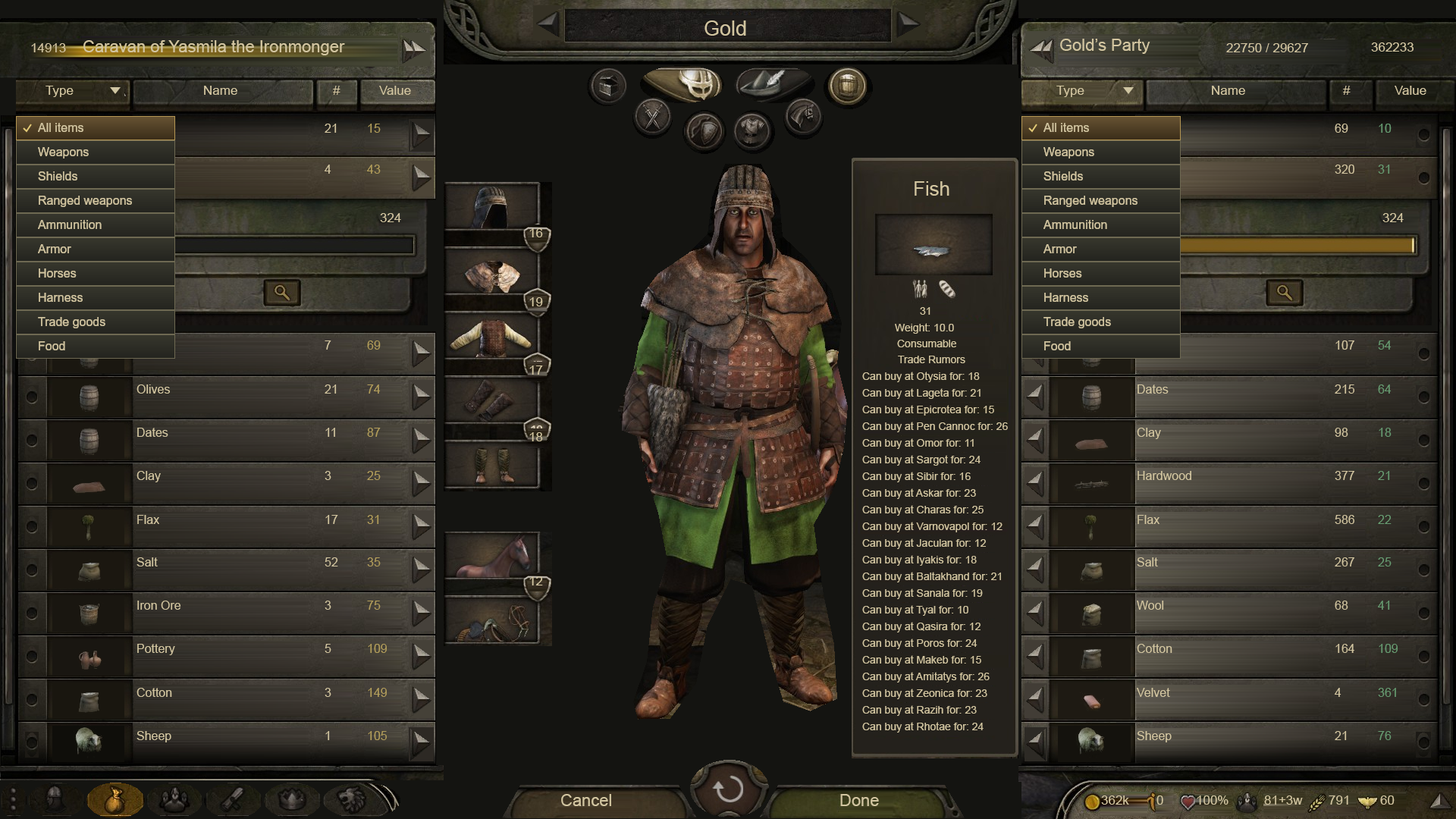
<style>
.page{position:relative;width:1456px;height:819px}
.page>*{position:absolute;margin:0}
.t1{font:20.5px "ArialMT";color:#d2c5a0}
.t2{font:16.7px "ArialMT";color:#d2c5a0}
.t3{font:12.9px "ArialMT";color:#d2c5a0}
.t4{font:12.1px "ArialMT";color:#d2c5a0}
.t5{font:12.1px "ArialMT";color:#b39e5b}
.t6{font:12.1px "ArialMT";color:#679b71}
.t7{font:19.7px "ArialMT";color:#d2c5a0}
.t8{font:10.6px "ArialMT";color:#d2c5a0}
</style>
<div class="page">
<p class="t1" style="left:704px;top:20px;width:42px;height:16px">Gold</p>
<p class="t2" style="left:83px;top:40px;width:262px;height:15px">Caravan of Yasmila the Ironmonger</p>
<p class="t2" style="left:1060px;top:39px;width:90px;height:15px">Gold’s Party</p>
<p class="t3" style="left:31px;top:43px;width:35px;height:9px">14913</p>
<p class="t3" style="left:1226px;top:43px;width:82px;height:9px">22750 / 29627</p>
<p class="t3" style="left:1371px;top:42px;width:43px;height:10px">362233</p>
<p class="t3" style="left:45px;top:86px;width:29px;height:11px">Type</p>
<p class="t3" style="left:204px;top:86px;width:33px;height:9px">Name</p>
<p class="t3" style="left:333px;top:86px;width:7px;height:9px">#</p>
<p class="t3" style="left:379px;top:86px;width:32px;height:9px">Value</p>
<p class="t3" style="left:1056px;top:86px;width:28px;height:11px">Type</p>
<p class="t3" style="left:1212px;top:86px;width:33px;height:9px">Name</p>
<p class="t3" style="left:1343px;top:86px;width:8px;height:9px">#</p>
<p class="t3" style="left:1395px;top:86px;width:31px;height:9px">Value</p>
<p class="t1" style="left:38px;top:120px;width:48px;height:18px">Gold</p>
<p class="t4" style="left:325px;top:124px;width:12px;height:9px">21</p>
<p class="t5" style="left:368px;top:124px;width:13px;height:9px">15</p>
<p class="t1" style="left:1043px;top:120px;width:49px;height:18px">Gold</p>
<p class="t4" style="left:1335px;top:124px;width:13px;height:9px">69</p>
<p class="t6" style="left:1379px;top:124px;width:13px;height:9px">10</p>
<p class="t1" style="left:38px;top:144px;width:54px;height:18px">Gold</p>
<p class="t1" style="left:1043px;top:144px;width:54px;height:18px">Gold</p>
<p class="t1" style="left:38px;top:168px;width:42px;height:19px">Gold</p>
<p class="t4" style="left:325px;top:165px;width:6px;height:9px">4</p>
<p class="t5" style="left:367px;top:165px;width:14px;height:9px">43</p>
<p class="t1" style="left:1043px;top:168px;width:43px;height:19px">Gold</p>
<p class="t4" style="left:1335px;top:165px;width:19px;height:9px">320</p>
<p class="t6" style="left:1378px;top:165px;width:12px;height:9px">31</p>
<p class="t7" style="left:915px;top:181px;width:34px;height:15px">Fish</p>
<p class="t1" style="left:38px;top:193px;width:97px;height:18px">Gold</p>
<p class="t1" style="left:1043px;top:193px;width:98px;height:18px">Gold</p>
<p class="t1" style="left:38px;top:217px;width:67px;height:18px">Gold</p>
<p class="t3" style="left:380px;top:213px;width:21px;height:9px">324</p>
<p class="t1" style="left:1043px;top:217px;width:67px;height:18px">Gold</p>
<p class="t3" style="left:1382px;top:213px;width:22px;height:9px">324</p>
<p class="t3" style="left:529px;top:228px;width:14px;height:9px">16</p>
<p class="t1" style="left:38px;top:241px;width:36px;height:18px">Gold</p>
<p class="t1" style="left:1043px;top:241px;width:36px;height:18px">Gold</p>
<p class="t1" style="left:38px;top:265px;width:41px;height:19px">Gold</p>
<p class="t1" style="left:1043px;top:265px;width:41px;height:19px">Gold</p>
<p class="t1" style="left:38px;top:290px;width:48px;height:18px">Gold</p>
<p class="t1" style="left:1043px;top:290px;width:48px;height:18px">Gold</p>
<p class="t3" style="left:529px;top:297px;width:14px;height:9px">19</p>
<p class="t1" style="left:38px;top:314px;width:70px;height:18px">Gold</p>
<p class="t8" style="left:920px;top:307px;width:10px;height:8px">31</p>
<p class="t1" style="left:1043px;top:314px;width:71px;height:18px">Gold</p>
<p class="t8" style="left:895px;top:323px;width:59px;height:11px">Weight: 10.0</p>
<p class="t1" style="left:38px;top:338px;width:30px;height:18px">Gold</p>
<p class="t4" style="left:325px;top:340px;width:6px;height:10px">7</p>
<p class="t5" style="left:367px;top:340px;width:14px;height:10px">69</p>
<p class="t8" style="left:897px;top:340px;width:59px;height:7px">Consumable</p>
<p class="t1" style="left:1043px;top:338px;width:31px;height:18px">Gold</p>
<p class="t4" style="left:1335px;top:340px;width:19px;height:10px">107</p>
<p class="t6" style="left:1378px;top:340px;width:14px;height:10px">54</p>
<p class="t3" style="left:529px;top:366px;width:14px;height:9px">17</p>
<p class="t8" style="left:898px;top:356px;width:67px;height:7px">Trade Rumors</p>
<p class="t8" style="left:862px;top:372px;width:118px;height:10px">Can buy at Otysia for: 18</p>
<p class="t4" style="left:136px;top:384px;width:34px;height:10px">Olives</p>
<p class="t4" style="left:325px;top:384px;width:12px;height:10px">21</p>
<p class="t5" style="left:367px;top:384px;width:14px;height:10px">74</p>
<p class="t8" style="left:862px;top:388px;width:119px;height:11px">Can buy at Lageta for: 21</p>
<p class="t4" style="left:1137px;top:384px;width:32px;height:10px">Dates</p>
<p class="t4" style="left:1335px;top:384px;width:19px;height:10px">215</p>
<p class="t6" style="left:1378px;top:384px;width:14px;height:10px">64</p>
<p class="t8" style="left:862px;top:405px;width:132px;height:11px">Can buy at Epicrotea for: 15</p>
<p class="t8" style="left:862px;top:422px;width:146px;height:10px">Can buy at Pen Cannoc for: 26</p>
<p class="t4" style="left:137px;top:428px;width:31px;height:9px">Dates</p>
<p class="t4" style="left:325px;top:428px;width:10px;height:9px">11</p>
<p class="t5" style="left:367px;top:428px;width:14px;height:9px">87</p>
<p class="t3" style="left:529px;top:432px;width:14px;height:9px">18</p>
<p class="t4" style="left:1137px;top:428px;width:24px;height:11px">Clay</p>
<p class="t4" style="left:1335px;top:428px;width:13px;height:9px">98</p>
<p class="t6" style="left:1379px;top:428px;width:13px;height:9px">18</p>
<p class="t8" style="left:862px;top:438px;width:112px;height:11px">Can buy at Omor for: 11</p>
<p class="t8" style="left:862px;top:455px;width:119px;height:11px">Can buy at Sargot for: 24</p>
<p class="t4" style="left:136px;top:471px;width:25px;height:11px">Clay</p>
<p class="t4" style="left:325px;top:471px;width:6px;height:9px">3</p>
<p class="t5" style="left:367px;top:471px;width:14px;height:9px">25</p>
<p class="t8" style="left:862px;top:472px;width:109px;height:10px">Can buy at Sibir for: 16</p>
<p class="t4" style="left:1137px;top:471px;width:54px;height:9px">Hardwood</p>
<p class="t4" style="left:1335px;top:471px;width:19px;height:9px">377</p>
<p class="t6" style="left:1378px;top:471px;width:12px;height:9px">21</p>
<p class="t8" style="left:862px;top:488px;width:114px;height:11px">Can buy at Askar for: 23</p>
<p class="t8" style="left:862px;top:505px;width:122px;height:11px">Can buy at Charas for: 25</p>
<p class="t4" style="left:137px;top:515px;width:22px;height:9px">Flax</p>
<p class="t4" style="left:325px;top:515px;width:13px;height:9px">17</p>
<p class="t5" style="left:367px;top:515px;width:12px;height:9px">31</p>
<p class="t8" style="left:862px;top:522px;width:141px;height:10px">Can buy at Varnovapol for: 12</p>
<p class="t4" style="left:1137px;top:515px;width:22px;height:9px">Flax</p>
<p class="t4" style="left:1335px;top:515px;width:19px;height:9px">586</p>
<p class="t6" style="left:1378px;top:515px;width:14px;height:9px">22</p>
<p class="t8" style="left:862px;top:538px;width:124px;height:11px">Can buy at Jaculan for: 12</p>
<p class="t4" style="left:136px;top:557px;width:22px;height:9px">Salt</p>
<p class="t4" style="left:325px;top:557px;width:13px;height:9px">52</p>
<p class="t5" style="left:367px;top:557px;width:14px;height:9px">35</p>
<p class="t8" style="left:862px;top:555px;width:115px;height:11px">Can buy at Iyakis for: 18</p>
<p class="t4" style="left:1137px;top:557px;width:21px;height:9px">Salt</p>
<p class="t4" style="left:1335px;top:557px;width:19px;height:9px">267</p>
<p class="t6" style="left:1378px;top:557px;width:14px;height:9px">25</p>
<p class="t3" style="left:529px;top:576px;width:14px;height:9px">12</p>
<p class="t8" style="left:862px;top:572px;width:139px;height:10px">Can buy at Baltakhand for: 21</p>
<p class="t8" style="left:862px;top:588px;width:121px;height:11px">Can buy at Sanala for: 19</p>
<p class="t4" style="left:137px;top:601px;width:44px;height:9px">Iron Ore</p>
<p class="t4" style="left:325px;top:601px;width:6px;height:9px">3</p>
<p class="t5" style="left:367px;top:601px;width:14px;height:9px">75</p>
<p class="t8" style="left:862px;top:605px;width:106px;height:11px">Can buy at Tyal for: 10</p>
<p class="t4" style="left:1137px;top:601px;width:27px;height:9px">Wool</p>
<p class="t4" style="left:1335px;top:601px;width:13px;height:9px">68</p>
<p class="t6" style="left:1378px;top:601px;width:12px;height:9px">41</p>
<p class="t8" style="left:862px;top:622px;width:119px;height:10px">Can buy at Qasira for: 12</p>
<p class="t8" style="left:862px;top:639px;width:115px;height:10px">Can buy at Poros for: 24</p>
<p class="t4" style="left:137px;top:644px;width:38px;height:11px">Pottery</p>
<p class="t4" style="left:325px;top:644px;width:6px;height:9px">5</p>
<p class="t5" style="left:368px;top:644px;width:19px;height:9px">109</p>
<p class="t4" style="left:1137px;top:644px;width:35px;height:9px">Cotton</p>
<p class="t4" style="left:1335px;top:644px;width:19px;height:9px">164</p>
<p class="t6" style="left:1379px;top:644px;width:19px;height:9px">109</p>
<p class="t8" style="left:862px;top:655px;width:119px;height:11px">Can buy at Makeb for: 15</p>
<p class="t8" style="left:862px;top:672px;width:128px;height:10px">Can buy at Amitatys for: 26</p>
<p class="t4" style="left:136px;top:688px;width:36px;height:9px">Cotton</p>
<p class="t4" style="left:325px;top:688px;width:6px;height:9px">3</p>
<p class="t5" style="left:368px;top:688px;width:19px;height:9px">149</p>
<p class="t8" style="left:862px;top:689px;width:125px;height:10px">Can buy at Zeonica for: 23</p>
<p class="t4" style="left:1137px;top:688px;width:33px;height:9px">Velvet</p>
<p class="t4" style="left:1335px;top:688px;width:6px;height:9px">4</p>
<p class="t6" style="left:1378px;top:688px;width:18px;height:9px">361</p>
<p class="t8" style="left:862px;top:705px;width:115px;height:11px">Can buy at Razih for: 23</p>
<p class="t8" style="left:862px;top:722px;width:122px;height:11px">Can buy at Rhotae for: 24</p>
<p class="t4" style="left:136px;top:731px;width:35px;height:11px">Sheep</p>
<p class="t4" style="left:325px;top:731px;width:5px;height:9px">1</p>
<p class="t5" style="left:368px;top:731px;width:19px;height:9px">105</p>
<p class="t4" style="left:1137px;top:731px;width:35px;height:11px">Sheep</p>
<p class="t4" style="left:1335px;top:731px;width:12px;height:9px">21</p>
<p class="t6" style="left:1378px;top:731px;width:14px;height:9px">76</p>
<p class="t2" style="left:561px;top:794px;width:50px;height:12px">Cancel</p>
<p class="t2" style="left:840px;top:794px;width:39px;height:12px">Done</p>
<p class="t3" style="left:1101px;top:795px;width:28px;height:10px">362k</p>
<p class="t3" style="left:1156px;top:795px;width:7px;height:10px">0</p>
<p class="t3" style="left:1197px;top:795px;width:31px;height:10px">100%</p>
<p class="t3" style="left:1264px;top:795px;width:39px;height:10px">81+3w</p>
<p class="t3" style="left:1329px;top:795px;width:19px;height:10px">791</p>
<p class="t3" style="left:1380px;top:795px;width:15px;height:10px">60</p>
</div>
